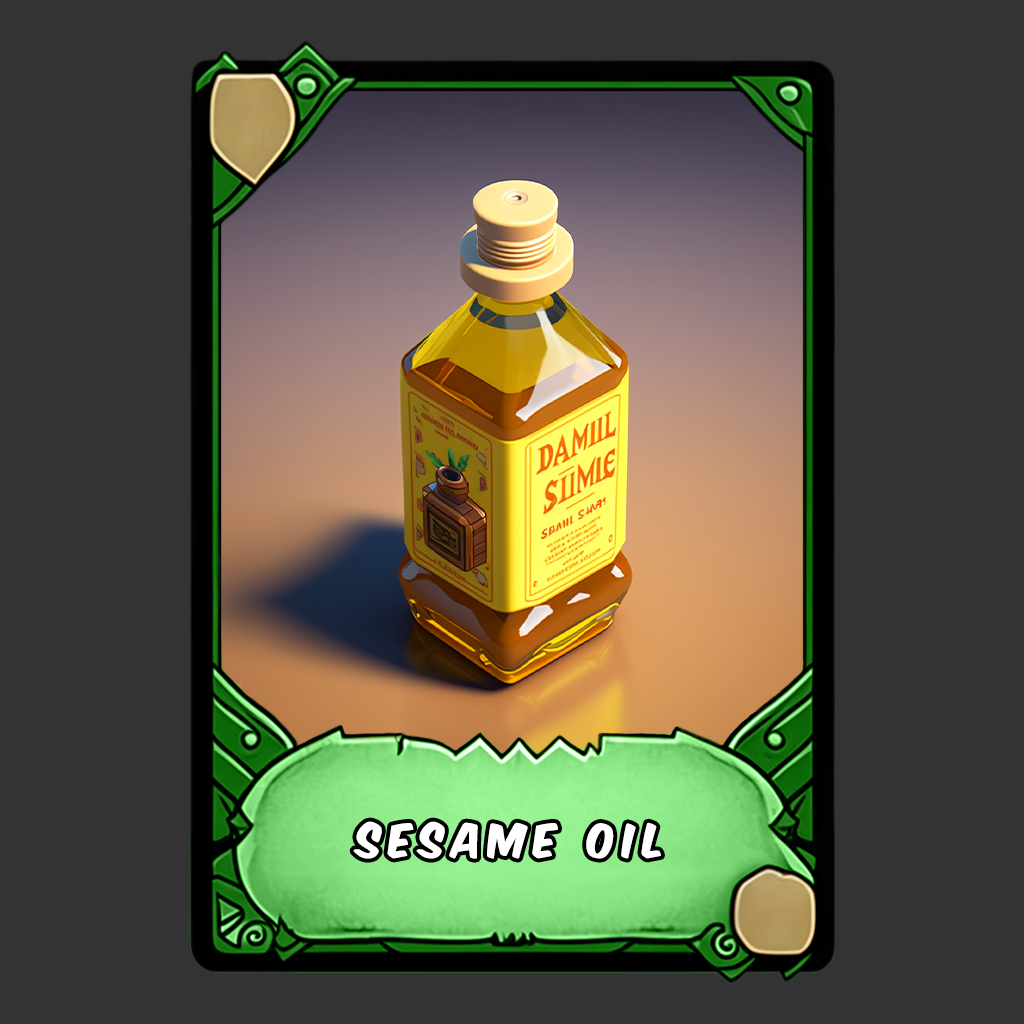
<style>
.page{position:relative;width:1024px;height:1024px;background:#333333}
.page>*{position:absolute;margin:0}
.t1{font:40px "KomikaAxis";letter-spacing:0.2em;color:#ffffff}
</style>
<div class="page">
<p class="t1" style="left:353px;top:821px;width:308px;height:38px">sesame oil</p>
</div>
